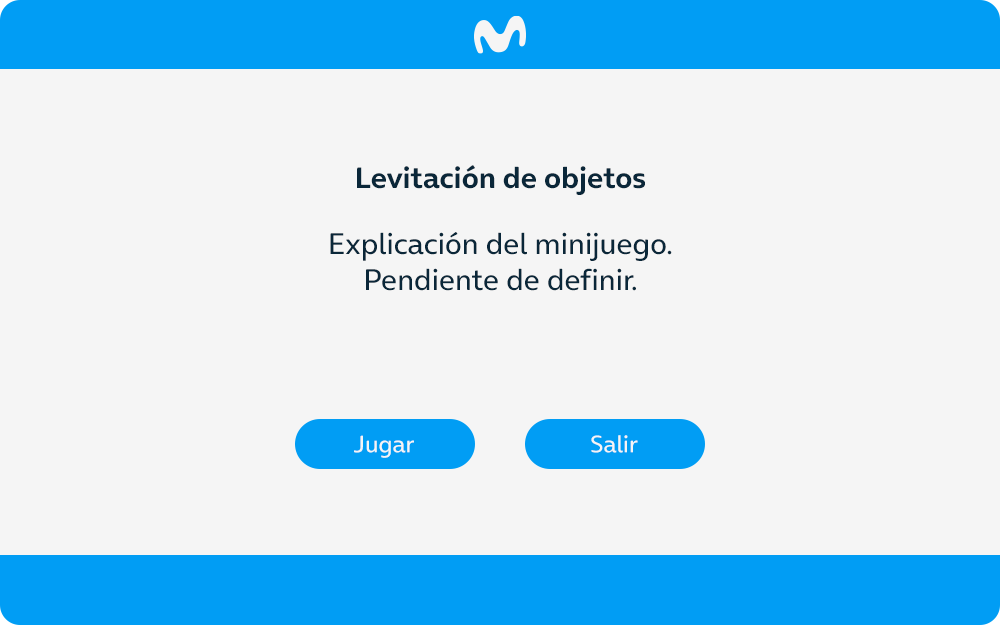
<style>
.page{position:relative;width:1000px;height:625px;background:#f5f5f5}
.page>*{position:absolute;margin:0}
.t1{font:30px "OnAir-Bold";color:#0a2739}
.t2{font:30px "OnAir-Regular";color:#0a2739}
.t3{font:24px "OnAir-Regular";color:#f5f5f5}
</style>
<div class="page">
<p class="t1" style="left:357px;top:165px;width:288px;height:30px">Levitación de objetos</p>
<p class="t2" style="left:330px;top:232px;width:342px;height:59px;text-align:center">Explicación del minijuego.<br>Pendiente de definir.</p>
<p class="t3" style="left:354px;top:435px;width:60px;height:23px">Jugar</p>
<p class="t3" style="left:591px;top:435px;width:47px;height:18px">Salir</p>
</div>
